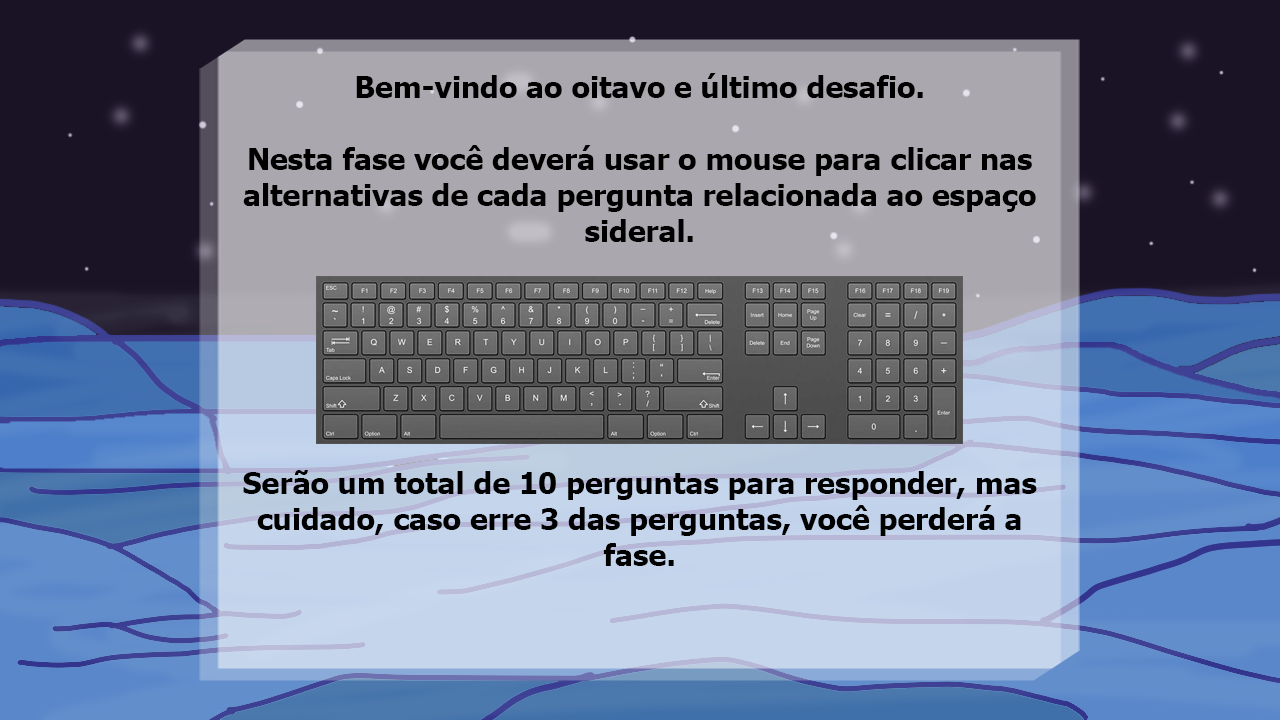
<style>
.page{position:relative;width:1280px;height:720px}
.page>*{position:absolute;margin:0}
.t1{font:30px "Tahoma-Bold";color:#000000}
</style>
<div class="page">
<p class="t1" style="left:243px;top:73px;width:794px;height:493px;text-align:center">Bem-vindo ao oitavo e último desafio.<br><br>Nesta fase você deverá usar o mouse para clicar nas alternativas de cada pergunta relacionada ao espaço sideral.<br><br><br><br><br><br><br>Serão um total de 10 perguntas para responder, mas cuidado, caso erre 3 das perguntas, você perderá a fase.</p>
</div>
